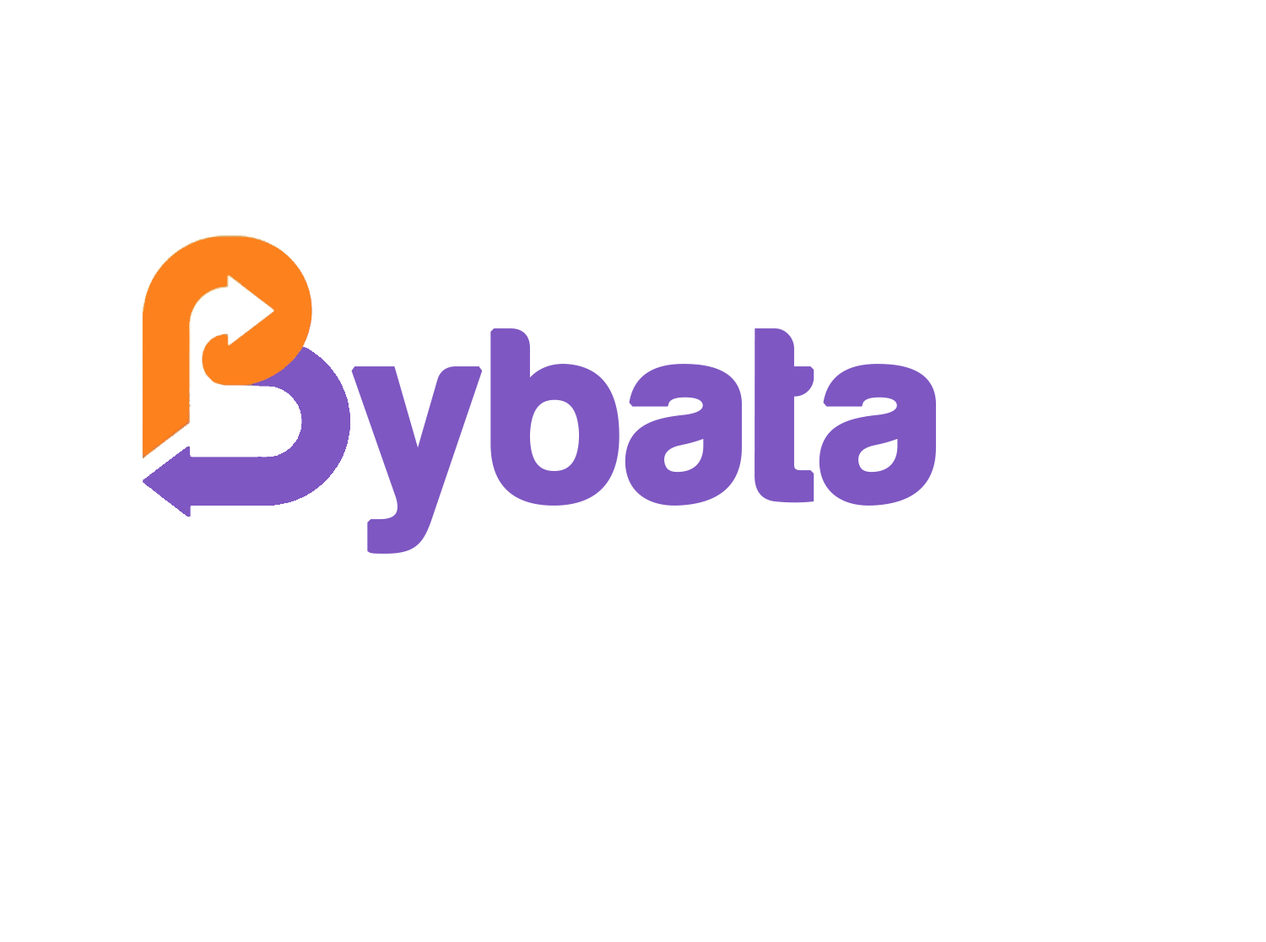
<style>
.page{position:relative;width:1266px;height:942px;background:#ffffff}
.page>*{position:absolute;margin:0}
.t1{font:246.4px "HarabaraMaisBold-HarabaraMaisBold";letter-spacing:-0.01em;color:#7e57c2;font-weight:bold}
</style>
<div class="page">
<p class="t1" style="left:351px;top:328px;width:585px;height:226px">ybata</p>
</div>
